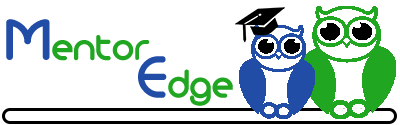
<style>
.page{position:relative;width:400px;height:125px;background:#ffffff}
.page>*{position:absolute;margin:0}
.t1{font:40px "MonoglycerideBold";color:#21a621}
.t2{font:64px "MonoglycerideBold";color:#214da6}
</style>
<div class="page">
<p class="t1" style="left:6px;top:19px;width:144px;height:42px"><span class="t2">M</span>entor</p>
<p class="t1" style="left:138px;top:56px;width:95px;height:50px"><span class="t2">E</span>dge</p>
</div>
